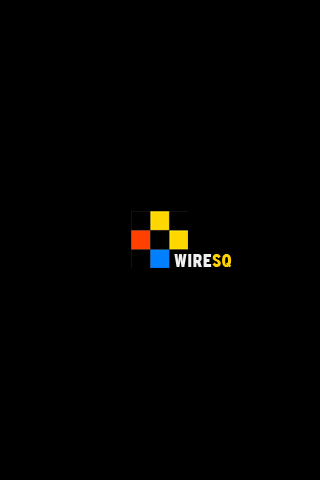
<style>
.page{position:relative;width:320px;height:480px;background:#000000}
.page>*{position:absolute;margin:0}
.t1{font:18px "InterstatePlus-BlackCondensed";letter-spacing:0.015em;color:#f0f0f0}
.t2{font:18px "InterstatePlus-BlackCondensed";letter-spacing:0.015em;color:#ffd200}
</style>
<div class="page">
<p class="t1" style="left:174px;top:254px;width:58px;height:14px">WIRE<span class="t2">SQ</span></p>
</div>
